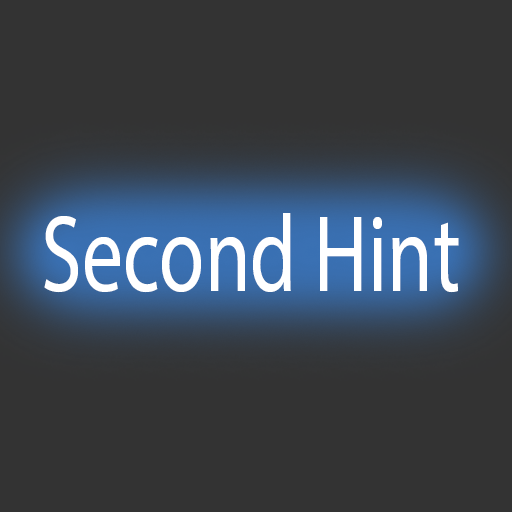
<style>
.page{position:relative;width:512px;height:512px;background:#333333}
.page>*{position:absolute;margin:0}
.t1{font:110px "MyriadPro-Regular";color:#ffffff;scale:0.75 1}
</style>
<div class="page">
<p class="t1" style="left:44px;top:213px;width:415px;height:80px">Second Hint</p>
</div>
